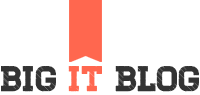
<style>
.page{position:relative;width:200px;height:95px;background:#ffffff}
.page>*{position:absolute;margin:0}
.t1{font:35.3px "Homestead-Display";color:#333333}
.t2{font:35.3px "Homestead-Display";color:#ff674f}
</style>
<div class="page">
<p class="t1" style="left:1px;top:66px;width:198px;height:26px">Big <span class="t2">it </span>blog</p>
</div>
